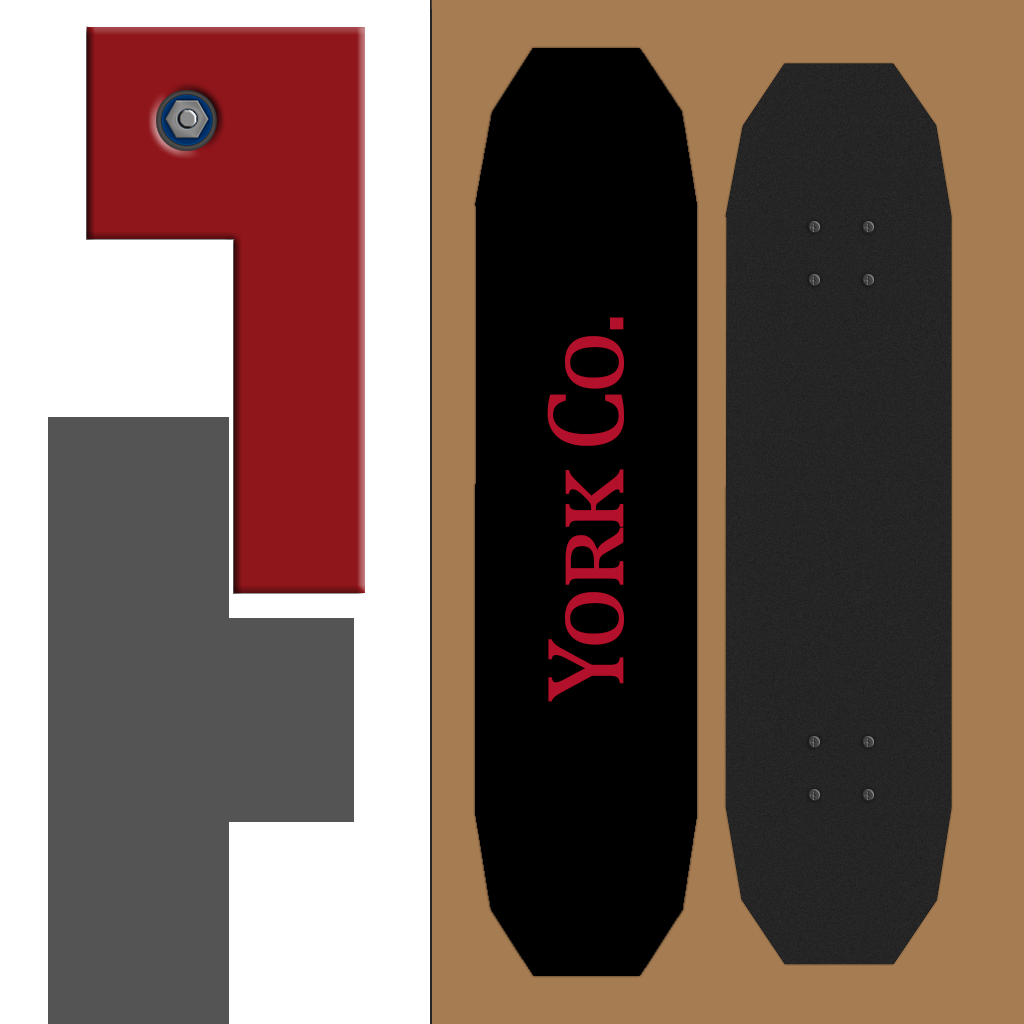
<style>
.page{position:relative;width:1024px;height:1024px}
.page>*{position:absolute;margin:0}
.t1{font:111.6px "CambriaMath";letter-spacing:-0.06em;color:#b3102b;font-variant:small-caps;font-weight:bold}
</style>
<div class="page">
<p class="t1" style="left:547px;top:317px;width:77px;height:385px;rotate:-90deg">York Co.</p>
</div>
